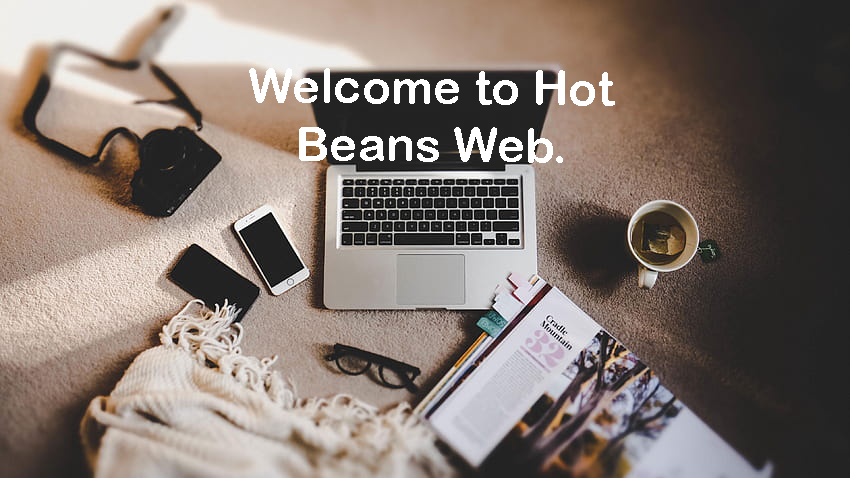
<style>
.page{position:relative;width:850px;height:478px}
.page>*{position:absolute;margin:0}
.t1{font:48px "ArialRoundedMTBold";color:#fffefe}
</style>
<div class="page">
<p class="t1" style="left:249px;top:68px;width:366px;height:95px;rotate:1deg">Welcome to Hot Beans Web.</p>
</div>
